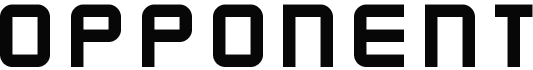
<style>
.page{position:relative;width:533px;height:70px;background:#ffffff}
.page>*{position:absolute;margin:0}
.t1{font:100px "KenVector-Future-Thin";color:#080707}
</style>
<div class="page">
<p class="t1" style="left:0px;top:4px;width:533px;height:63px">Opponent</p>
</div>
